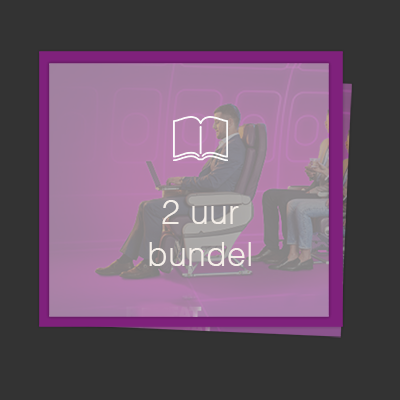
<style>
.page{position:relative;width:400px;height:400px;background:#333333}
.page>*{position:absolute;margin:0}
.t1{font:34.3px "Helvetica-Light";color:#f4eee8}
</style>
<div class="page">
<p class="t1" style="left:149px;top:200px;width:102px;height:66px;text-align:center">2 uur <br>bundel</p>
</div>
